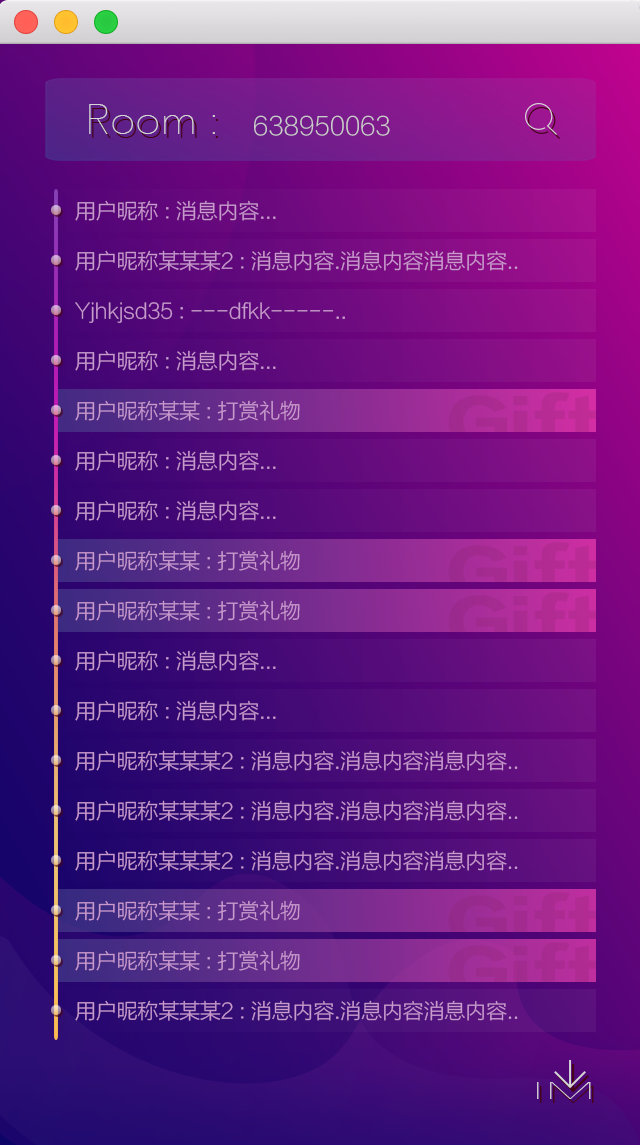
<style>
.page{position:relative;width:640px;height:1145px}
.page>*{position:absolute;margin:0}
.t1{font:41.7px "AvenirNext-UltraLight";color:#d6d6d6}
.t2{font:25px "FZLTXHK--GBK1-0";color:#cbcaca}
.t3{font:20.8px "FZLTXHK--GBK1-0";color:#ca99ce}
.t4{font:23.5px "AvenirNext-UltraLight";color:#d6d6d6;scale:2.48 1}
</style>
<div class="page">
<p class="t1" style="left:89px;top:104px;width:126px;height:30px">Room :</p>
<p class="t2" style="left:254px;top:115px;width:136px;height:21px">638950063</p>
<p class="t3" style="left:75px;top:200px;width:201px;height:21px">用户昵称 : 消息内容...</p>
<p class="t3" style="left:75px;top:250px;width:443px;height:21px">用户昵称某某某2 : 消息内容.消息内容消息内容..</p>
<p class="t3" style="left:75px;top:302px;width:270px;height:21px">Yjhkjsd35 : ---dfkk-----..</p>
<p class="t3" style="left:75px;top:350px;width:201px;height:21px">用户昵称 : 消息内容...</p>
<p class="t3" style="left:75px;top:400px;width:225px;height:21px">用户昵称某某 : 打赏礼物</p>
<p class="t3" style="left:75px;top:450px;width:201px;height:21px">用户昵称 : 消息内容...</p>
<p class="t3" style="left:75px;top:500px;width:201px;height:21px">用户昵称 : 消息内容...</p>
<p class="t3" style="left:75px;top:550px;width:225px;height:21px">用户昵称某某 : 打赏礼物</p>
<p class="t3" style="left:75px;top:600px;width:225px;height:21px">用户昵称某某 : 打赏礼物</p>
<p class="t3" style="left:75px;top:650px;width:201px;height:21px">用户昵称 : 消息内容...</p>
<p class="t3" style="left:75px;top:700px;width:201px;height:21px">用户昵称 : 消息内容...</p>
<p class="t3" style="left:75px;top:750px;width:443px;height:21px">用户昵称某某某2 : 消息内容.消息内容消息内容..</p>
<p class="t3" style="left:75px;top:800px;width:443px;height:21px">用户昵称某某某2 : 消息内容.消息内容消息内容..</p>
<p class="t3" style="left:75px;top:850px;width:443px;height:21px">用户昵称某某某2 : 消息内容.消息内容消息内容..</p>
<p class="t3" style="left:75px;top:900px;width:225px;height:21px">用户昵称某某 : 打赏礼物</p>
<p class="t3" style="left:75px;top:950px;width:225px;height:21px">用户昵称某某 : 打赏礼物</p>
<p class="t3" style="left:75px;top:1000px;width:443px;height:21px">用户昵称某某某2 : 消息内容.消息内容消息内容..</p>
<p class="t4" style="left:537px;top:1082px;width:54px;height:17px">IM</p>
</div>
